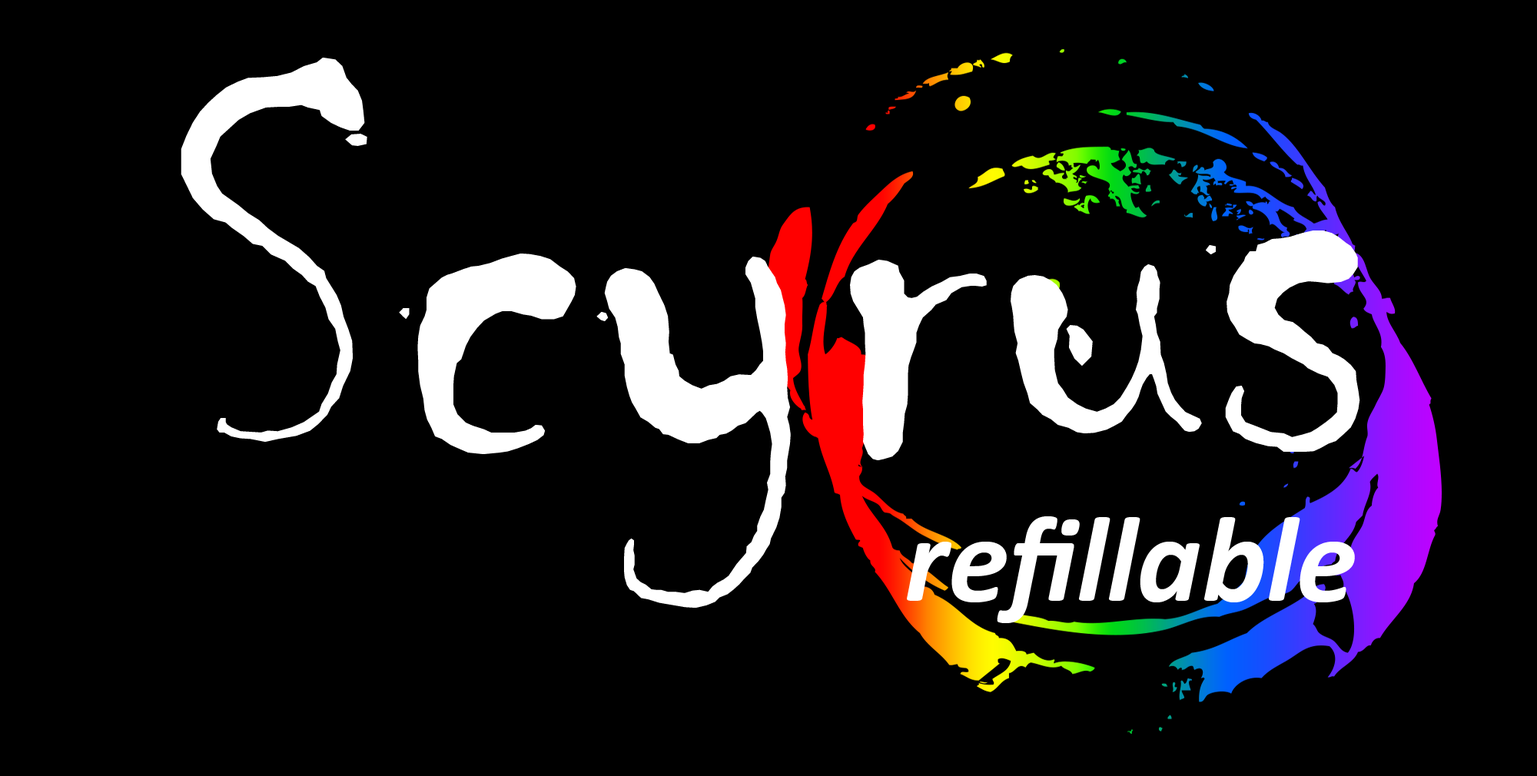
<style>
.page{position:relative;width:1537px;height:776px;background:#000000}
.page>*{position:absolute;margin:0}
.t1{font:649.1px "Chiller-Regular";color:#ffffff}
.t2{font:122.9px "Calibri-BoldItalic";color:#ffffff}
</style>
<div class="page">
<p class="t1" style="left:181px;top:58px;width:1179px;height:550px">Scyrus</p>
<p class="t2" style="left:907px;top:516px;width:448px;height:107px">refillable</p>
</div>
